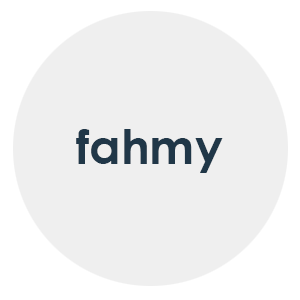
<style>
.page{position:relative;width:300px;height:300px;background:#efefef}
.page>*{position:absolute;margin:0}
.t1{font:48px "CenturyGothic-Bold";color:#203748}
</style>
<div class="page">
<p class="t1" style="left:76px;top:129px;width:147px;height:44px">fahmy</p>
</div>
